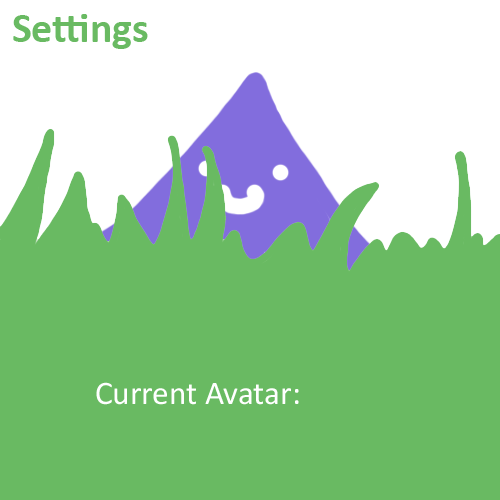
<style>
.page{position:relative;width:500px;height:500px;background:#69ba62}
.page>*{position:absolute;margin:0}
.t1{font:41.7px "Calibri-Bold";color:#69ba62}
.t2{font:33.2px "Calibri";color:#ffffff}
</style>
<div class="page">
<p class="t1" style="left:13px;top:14px;width:135px;height:35px">Settings</p>
<p class="t2" style="left:96px;top:382px;width:203px;height:23px">Current Avatar:</p>
</div>
